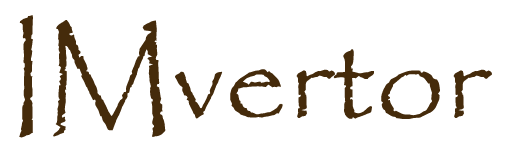
<style>
.page{position:relative;width:505px;height:148px;background:#ffffff}
.page>*{position:absolute;margin:0}
.t1{font:125.4px "Papyrus-Regular";color:#452b0b}
</style>
<div class="page">
<p class="t1" style="left:19px;top:15px;width:473px;height:123px">IMvertor</p>
</div>
